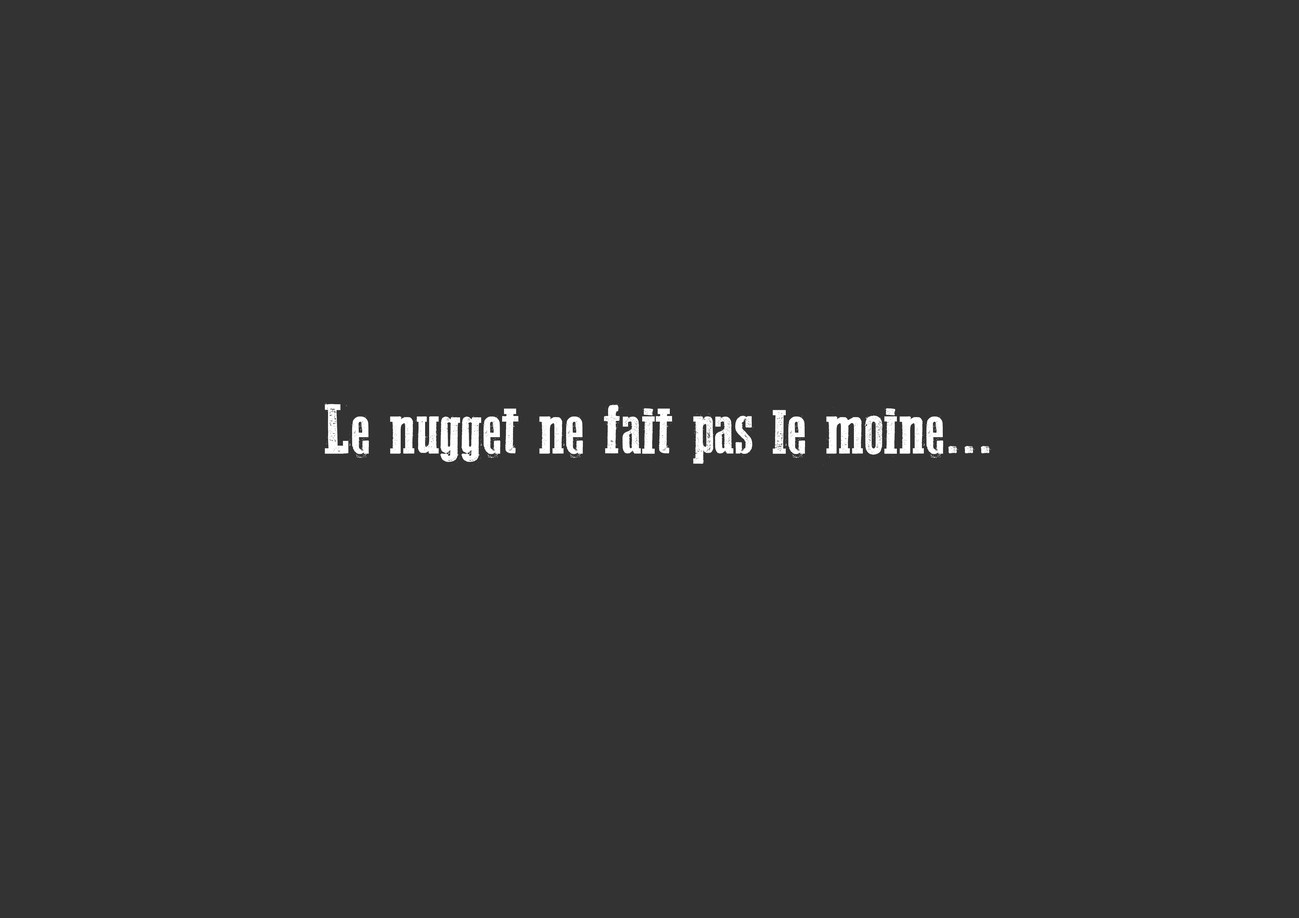
<style>
.page{position:relative;width:1299px;height:918px;background:#333333}
.page>*{position:absolute;margin:0}
.t1{font:74px "WesternBangBang";color:#ffffff}
</style>
<div class="page">
<p class="t1" style="left:324px;top:403px;width:667px;height:64px">Le nugget ne fait pas le moine...</p>
</div>
